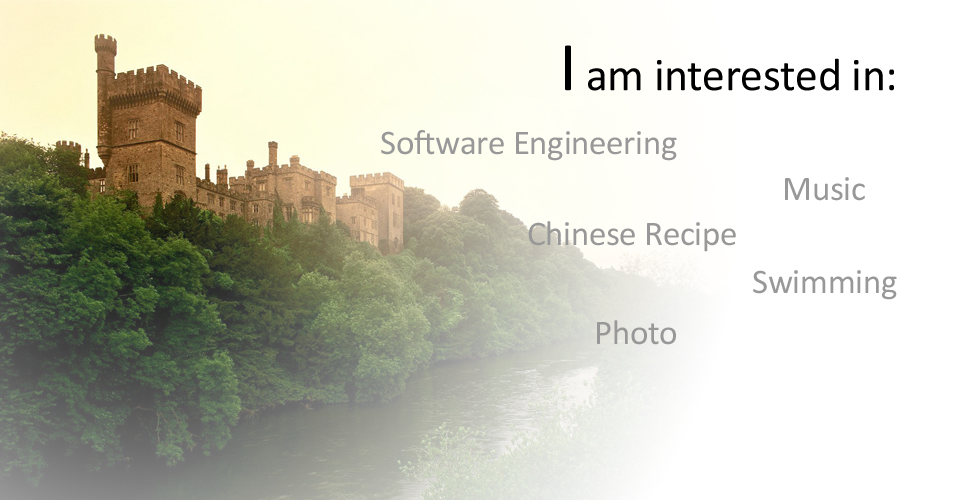
<style>
.page{position:relative;width:960px;height:500px;background:#ffffff}
.page>*{position:absolute;margin:0}
.t1{font:46px "Calibri";letter-spacing:-0.01em;color:#000000}
.t2{font:70px "Calibri";letter-spacing:-0.01em;color:#000000}
.t3{font:35px "Calibri";letter-spacing:-0.01em;color:#989898}
</style>
<div class="page">
<p class="t1" style="left:565px;top:45px;width:329px;height:46px"><span class="t2">I</span> am interested in:</p>
<p class="t3" style="left:381px;top:130px;width:296px;height:31px">Software Engineering</p>
<p class="t3" style="left:785px;top:177px;width:80px;height:24px">Music</p>
<p class="t3" style="left:528px;top:221px;width:208px;height:31px">Chinese Recipe</p>
<p class="t3" style="left:753px;top:270px;width:144px;height:30px">Swimming</p>
<p class="t3" style="left:597px;top:320px;width:79px;height:25px">Photo</p>
</div>
